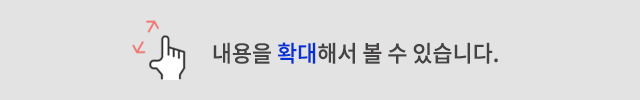
<style>
.page{position:relative;width:640px;height:100px;background:#e3e3e3}
.page>*{position:absolute;margin:0}
.t1{font:23px "NotoSansCJKkr-Medium";color:#454343;scale:0.95 1}
.t2{font:23px "NotoSansCJKkr-Medium";color:#0632d4;scale:0.95 1}
</style>
<div class="page">
<p class="t1" style="left:213px;top:42px;width:285px;height:22px">내용을<span class="t2"> 확대</span>해서 볼 수 있습니다.</p>
</div>
